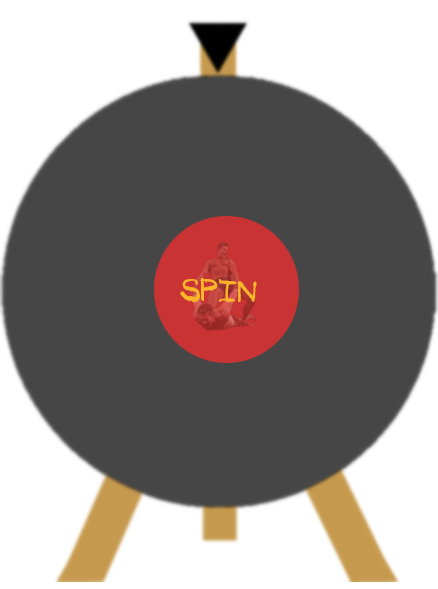
<style>
.page{position:relative;width:438px;height:589px;background:#464646}
.page>*{position:absolute;margin:0}
.t1{font:40.1px "TkachenkoSketch4F-Bold";color:#fcb428}
</style>
<div class="page">
<p class="t1" style="left:180px;top:278px;width:77px;height:25px">SPIN</p>
</div>
